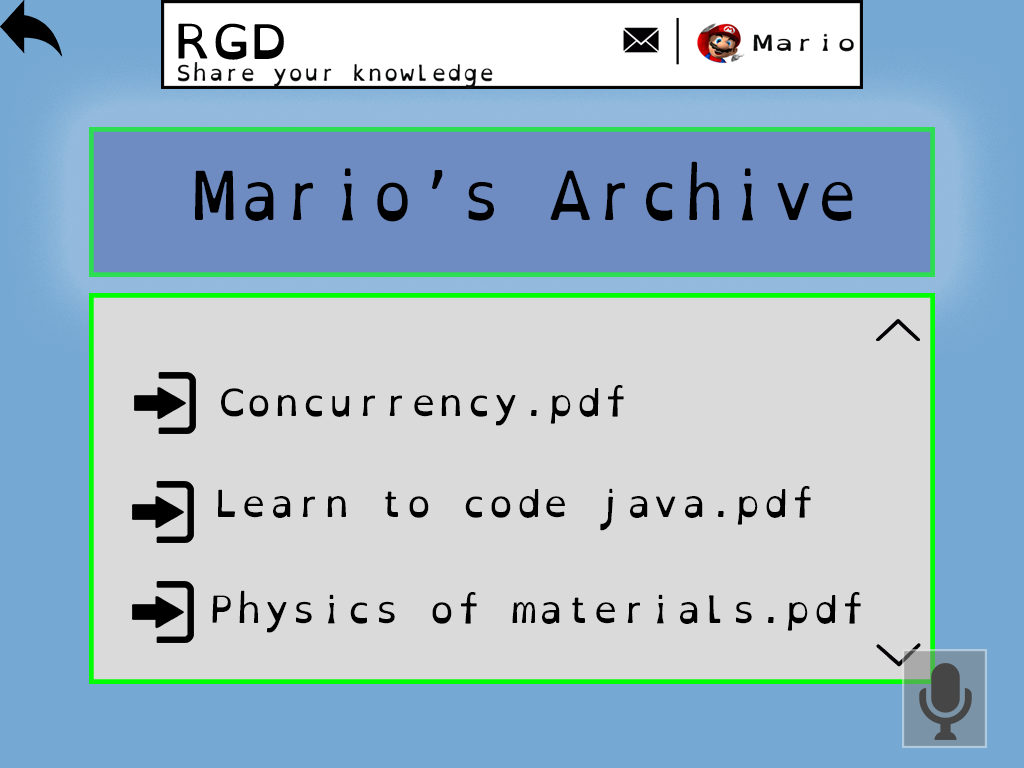
<style>
.page{position:relative;width:1024px;height:768px;background:#dadada}
.page>*{position:absolute;margin:0}
.t1{font:67.7px "OpenDyslexicMono-Regular";color:#000000;scale:0.9 1}
.t2{font:37.5px "OpenDyslexicMono-Regular";color:#000000}
</style>
<div class="page">
<p class="t1" style="left:195px;top:161px;width:658px;height:61px">Mario’s Archive</p>
<p class="t2" style="left:221px;top:385px;width:403px;height:41px">Concurrency.pdf</p>
<p class="t2" style="left:218px;top:486px;width:593px;height:45px">Learn to code java.pdf</p>
<p class="t2" style="left:212px;top:590px;width:649px;height:43px">Physics of materials.pdf</p>
</div>
